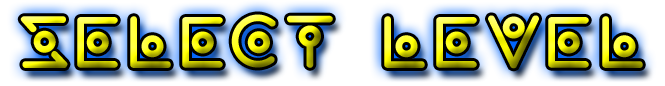
<style>
.page{position:relative;width:665px;height:86px}
.page>*{position:absolute;margin:0}
.t1{font:75px "wearealien!!"}
</style>
<div class="page">
<p class="t1" style="left:20px;top:14px;width:623px;height:55px">select Level</p>
</div>
